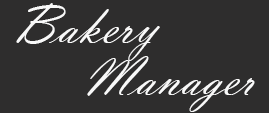
<style>
.page{position:relative;width:269px;height:113px;background:#2e2d2d}
.page>*{position:absolute;margin:0}
.t1{font:57px "VladimirScript";color:#fefefe}
</style>
<div class="page">
<p class="t1" style="left:16px;top:3px;width:144px;height:58px">Bakery</p>
<p class="t1" style="left:87px;top:56px;width:168px;height:56px">Manager</p>
</div>
